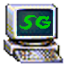
<style>
.page{position:relative;width:64px;height:64px}
.page>*{position:absolute;margin:0}
.t1{font:14.1px "Lady-Radical";color:#00cb00}
</style>
<div class="page">
<p class="t1" style="left:19px;top:15px;width:32px;height:15px">S G</p>
</div>
